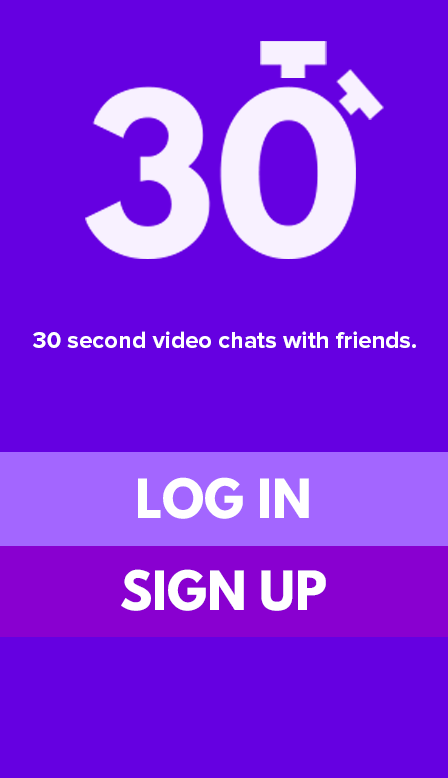
<style>
.page{position:relative;width:448px;height:778px;background:#6500e1}
.page>*{position:absolute;margin:0}
.t1{font:24px "ProximaNova-Bold";color:#ffffff}
.t2{font:48px "LeagueSpartan-Bold";color:#ffffff}
</style>
<div class="page">
<p class="t1" style="left:33px;top:331px;width:383px;height:17px">30 second video chats with friends.</p>
<p class="t2" style="left:138px;top:477px;width:171px;height:42px">LOG IN</p>
<p class="t2" style="left:121px;top:569px;width:205px;height:42px">SIGN UP</p>
</div>
